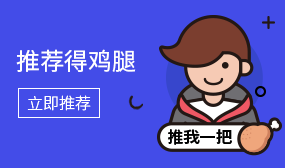
<style>
.page{position:relative;width:285px;height:168px;background:#434ce8}
.page>*{position:absolute;margin:0}
.t1{font:24px "SourceHanSansSC-Regular";color:#ffffff}
.t2{font:16px "SourceHanSansSC-Light";color:#ffffff}
</style>
<div class="page">
<p class="t1" style="left:16px;top:49px;width:120px;height:23px">推荐得鸡腿</p>
<p class="t2" style="left:27px;top:95px;width:64px;height:16px">立即推荐</p>
</div>
